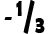
<style>
.page{position:relative;width:50px;height:34px;background:#ffffff}
.page>*{position:absolute;margin:0}
.t1{font:26.3px "BerlinSansFBDemi-Bold";color:#010000;scale:0.77 1}
.t2{font:44.6px "BerlinSansFBDemi-Bold";color:#010000;scale:0.82 1}
.t3{font:20px "BerlinSansFBDemi-Bold";color:#000000}
</style>
<div class="page">
<p class="t1" style="left:16px;top:1px;width:6px;height:15px">1</p>
<p class="t2" style="left:23px;top:0px;width:12px;height:34px">/</p>
<p class="t3" style="left:4px;top:17px;width:8px;height:3px">-</p>
<p class="t1" style="left:35px;top:18px;width:10px;height:15px">3</p>
</div>
